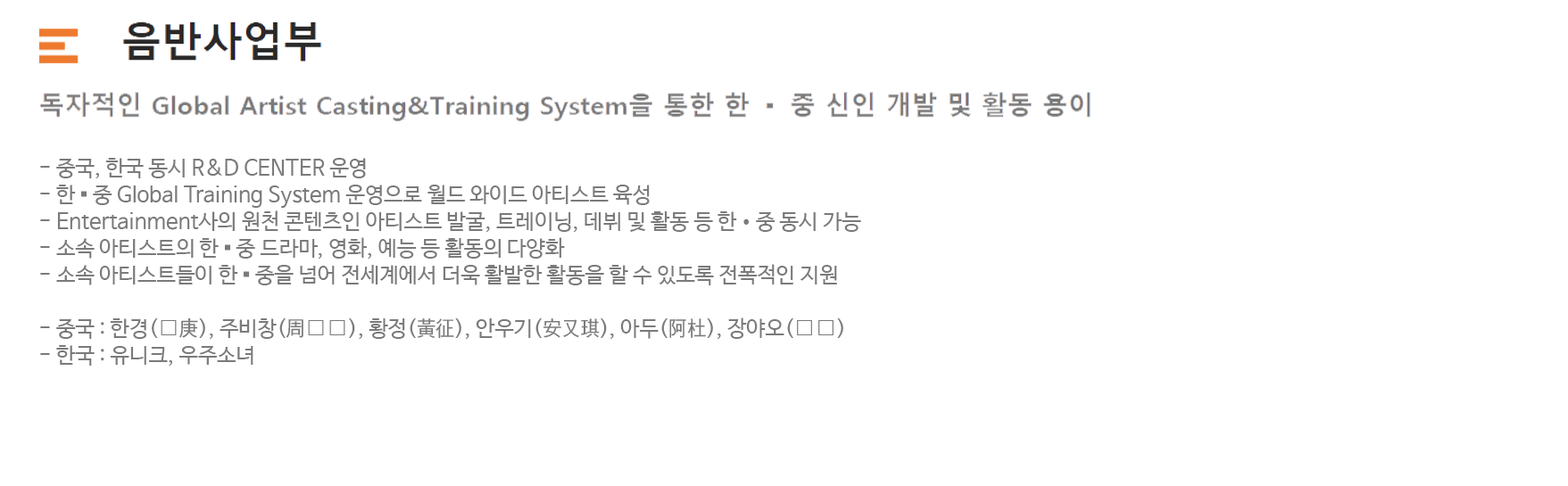
<style>
.page{position:relative;width:1568px;height:486px;background:#ffffff}
.page>*{position:absolute;margin:0}
.t1{font:21.4px/26.8px "NanumBarunGothic";color:#7b7a7a}
.t2{font:21.4px/26.8px "Gulim";color:#7b7a7a}
</style>
<div class="page">
<p class="t1" style="left:40px;top:158px;width:821px;height:208px">- 중국, 한국 동시 R&amp;D CENTER 운영 <br>- 한 <span class="t2">▪</span> 중 Global Training System 운영으로 월드 와이드 아티스트 육성<br>- Entertainment사의 원천 콘텐츠인 아티스트 발굴, 트레이닝, 데뷔 및 활동 등 한•중 동시 가능<br>- 소속 아티스트의 한 <span class="t2">▪</span> 중 드라마, 영화, 예능 등 활동의 다양화<br>- 소속 아티스트들이 한 <span class="t2">▪</span> 중을 넘어 전세계에서 더욱 활발한 활동을 할 수 있도록 전폭적인 지원<br><br>- 중국 : 한경(<span class="t2">韩</span>庚), 주비창(周<span class="t2">笔畅</span>), 황정(黃征), 안우기(安又琪), 아두(阿杜), 장야오(<span class="t2">张瑶</span>)<br>- 한국 : 유니크, 우주소녀</p>
</div>
